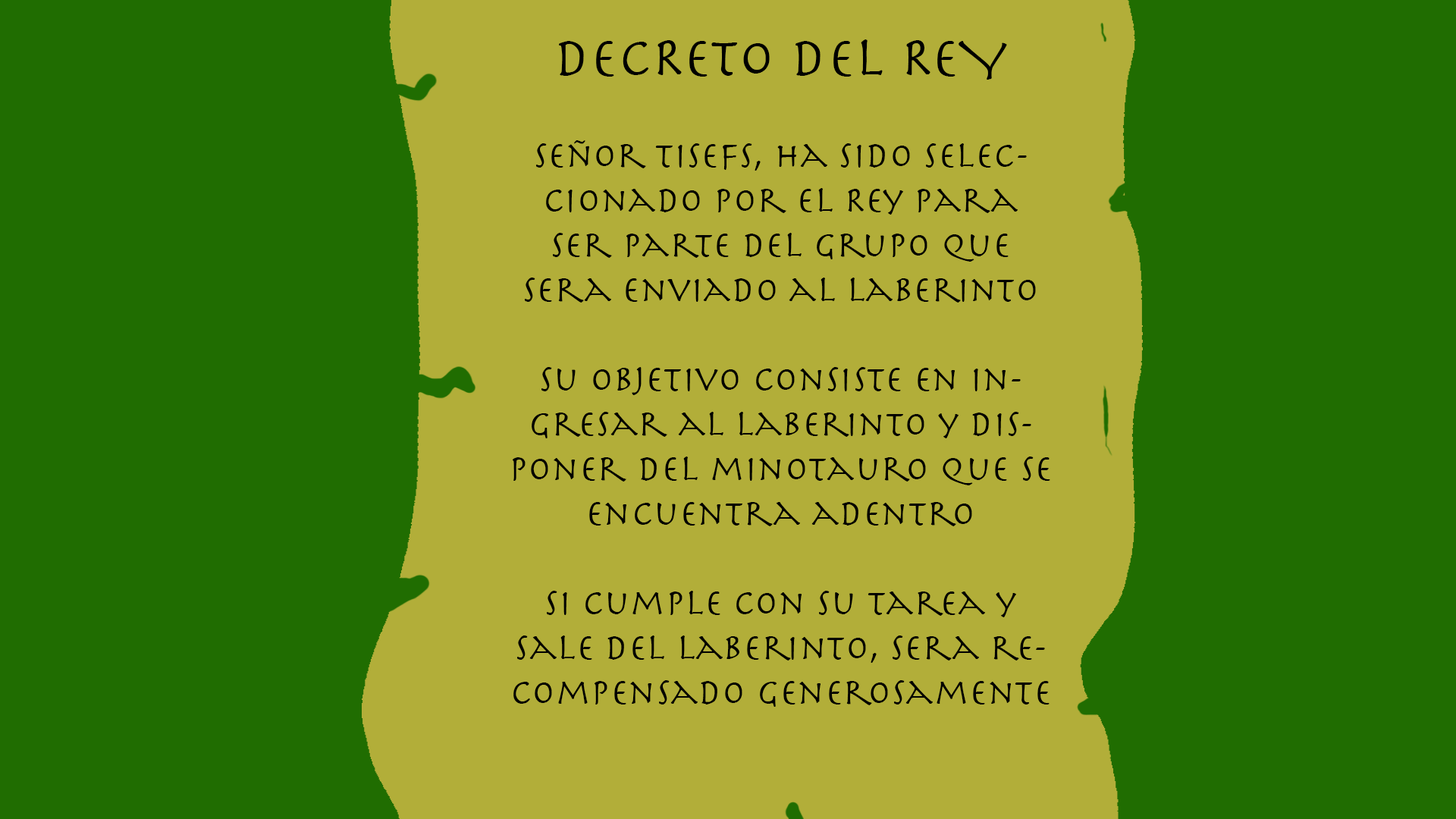
<style>
.page{position:relative;width:1456px;height:819px;background:#206d01}
.page>*{position:absolute;margin:0}
.t1{font:37.3px "Herculanum";color:#000000}
.t2{font:56.9px "Herculanum";color:#000000}
</style>
<div class="page">
<p class="t1" style="left:513px;top:39px;width:537px;height:668px;text-align:center"><span class="t2">DECRETO DEL REY<br><br></span>Señor Tisefs, ha sido seleccionado por el Rey para ser parte del grupo que sera enviado al laberinto<br><br>Su objetivo consiste en ingresar al laberinto y Disponer del minotauro que se encuentra adentro<br><br>Si cumple con su tarea y sale del laberinto, sera recompensado generosamente</p>
</div>
